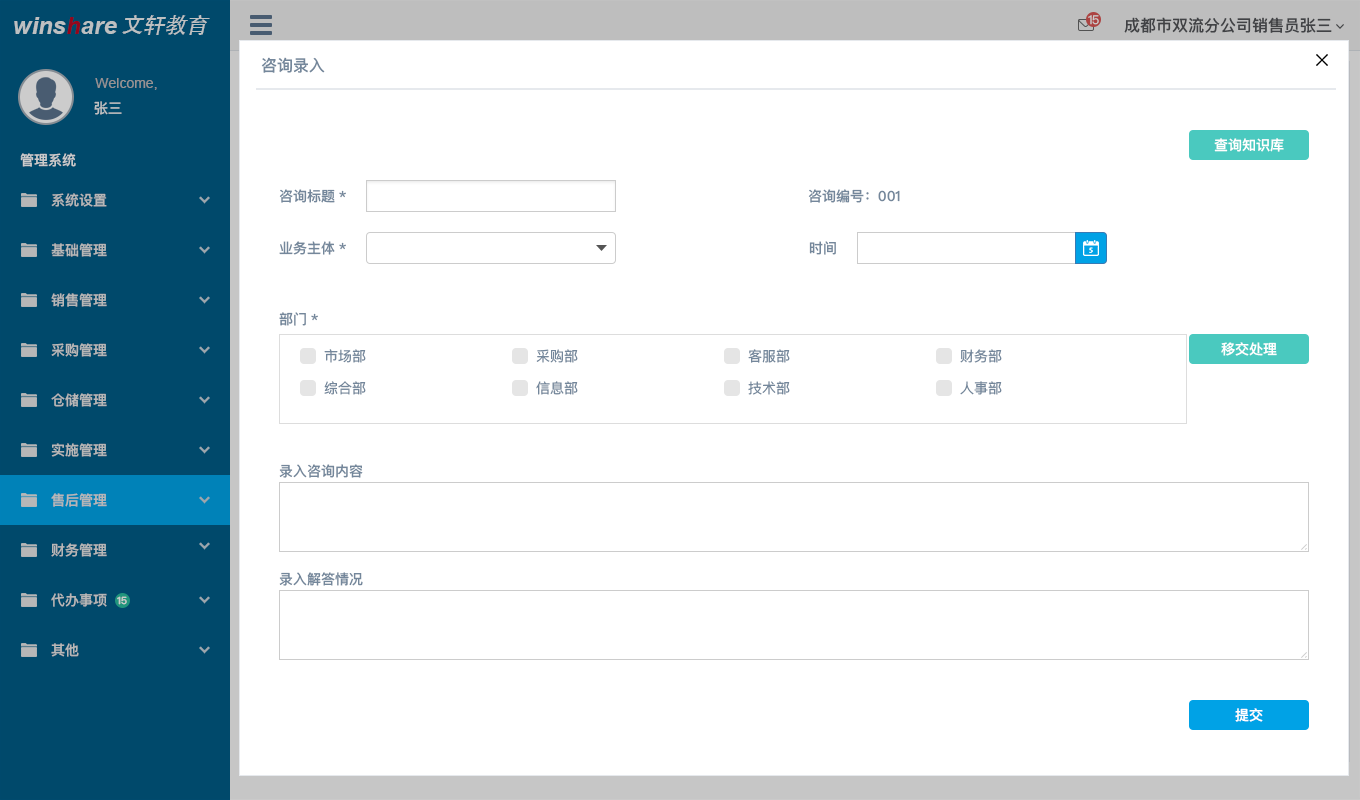
<style>
.page{position:relative;width:1360px;height:800px;background:#ffffff}
.page>*{position:absolute;margin:0}
.t1{font:24px "Arial-BoldItalicMT";color:#bdc0c1}
.t2{font:22px "STHeitiSC-Medium";color:#bdc0c1}
.t3{font:12px "PingFangSC-Regular";color:#cccccc}
.t4{font:16px "PingFangSC-Medium";color:#515356}
.t5{font:16px "PingFangSC-Medium";color:#74879b}
.t6{font:14px "ArialMT";color:#959393}
.t7{font:14px "PingFangSC-Medium";color:#bdc0c1}
.t8{font:14px "PingFangSC-Medium";color:#ffffff}
.t9{font:14px "PingFangSC-Medium";color:#cccccc}
.t10{font:14px "PingFangSC-Medium";color:#b7b7b7}
.t11{font:14px "PingFangSC-Medium";color:#74879b}
.t12{font:14px "PingFangSC-Regular";color:#74879b}
.t13{font:10px "PingFangSC-Medium";color:#cccccc}
</style>
<div class="page">
<p class="t1" style="left:14px;top:17px;width:103px;height:17px">winshare</p>
<p class="t2" style="left:122px;top:15px;width:88px;height:20px">文轩教育</p>
<p class="t3" style="left:1088px;top:15px;width:11px;height:10px">15</p>
<p class="t4" style="left:1124px;top:17px;width:208px;height:16px">成都市双流分公司销售员张三</p>
<p class="t5" style="left:261px;top:57px;width:64px;height:16px">咨询录入</p>
<p class="t6" style="left:95px;top:78px;width:62px;height:12px">Welcome,</p>
<p class="t7" style="left:94px;top:101px;width:28px;height:14px">张三</p>
<p class="t8" style="left:1214px;top:138px;width:70px;height:14px">查询知识库</p>
<p class="t9" style="left:20px;top:153px;width:56px;height:14px">管理系统</p>
<p class="t10" style="left:51px;top:193px;width:56px;height:14px">系统设置</p>
<p class="t11" style="left:279px;top:189px;width:67px;height:14px">咨询标题*</p>
<p class="t11" style="left:808px;top:189px;width:92px;height:14px">咨询编号：001</p>
<p class="t10" style="left:51px;top:243px;width:56px;height:14px">基础管理</p>
<p class="t11" style="left:279px;top:241px;width:67px;height:14px">业务主体*</p>
<p class="t11" style="left:809px;top:241px;width:27px;height:14px">时间</p>
<p class="t10" style="left:51px;top:293px;width:56px;height:14px">销售管理</p>
<p class="t11" style="left:279px;top:312px;width:39px;height:14px">部门*</p>
<p class="t8" style="left:1221px;top:342px;width:56px;height:14px">移交处理</p>
<p class="t10" style="left:51px;top:343px;width:56px;height:14px">采购管理</p>
<p class="t12" style="left:324px;top:349px;width:42px;height:14px">市场部</p>
<p class="t12" style="left:536px;top:349px;width:42px;height:14px">采购部</p>
<p class="t12" style="left:748px;top:349px;width:42px;height:14px">客服部</p>
<p class="t12" style="left:960px;top:349px;width:42px;height:14px">财务部</p>
<p class="t12" style="left:324px;top:381px;width:42px;height:14px">综合部</p>
<p class="t12" style="left:536px;top:381px;width:42px;height:14px">信息部</p>
<p class="t12" style="left:748px;top:381px;width:42px;height:14px">技术部</p>
<p class="t12" style="left:960px;top:381px;width:42px;height:14px">人事部</p>
<p class="t10" style="left:51px;top:393px;width:56px;height:14px">仓储管理</p>
<p class="t10" style="left:51px;top:443px;width:56px;height:14px">实施管理</p>
<p class="t11" style="left:279px;top:464px;width:84px;height:14px">录入咨询内容</p>
<p class="t10" style="left:51px;top:493px;width:56px;height:14px">售后管理</p>
<p class="t10" style="left:51px;top:543px;width:56px;height:14px">财务管理</p>
<p class="t11" style="left:279px;top:572px;width:84px;height:14px">录入解答情况</p>
<p class="t10" style="left:51px;top:593px;width:56px;height:14px">代办事项</p>
<p class="t13" style="left:117px;top:596px;width:10px;height:9px">15</p>
<p class="t10" style="left:51px;top:643px;width:28px;height:14px">其他</p>
<p class="t8" style="left:1235px;top:708px;width:28px;height:14px">提交</p>
</div>
